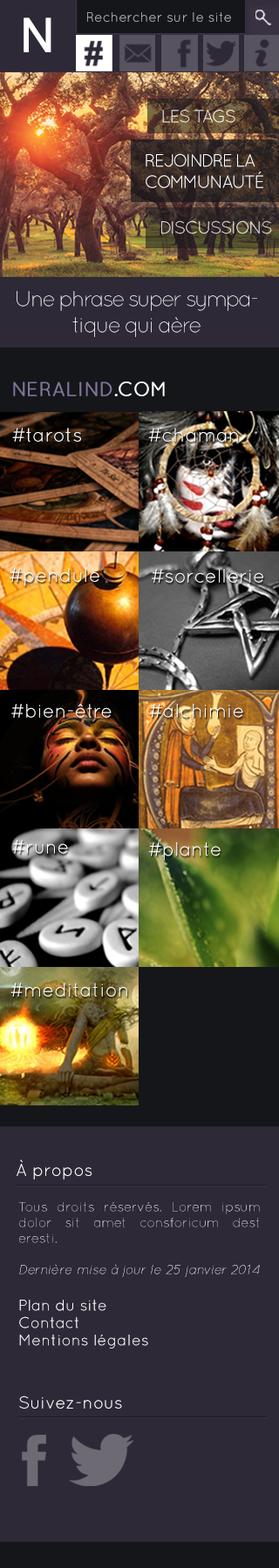
<style>
.page{position:relative;width:279px;height:1568px;background:#2e2937}
.page>*{position:absolute;margin:0}
.t1{font:47px "ArialMT";letter-spacing:-0.075em;color:#ffffff;font-weight:bold}
.t2{font:13.6px "QuicksandBook-Regular";color:#bababb}
.t3{font:17.8px "Quicksand-Regular";letter-spacing:-0.075em;color:#fef6e5;text-transform:uppercase}
.t4{font:17.8px "Quicksand-Regular";letter-spacing:-0.075em;color:#ffffff;text-transform:uppercase}
.t5{font:17.8px "Quicksand-Regular";letter-spacing:-0.075em;color:#e1ddd9;text-transform:uppercase}
.t6{font:21.8px "Quicksand-Light";letter-spacing:-0.075em;color:#ffffff}
.t7{font:20px "QuicksandBook-Regular";color:#817399;text-transform:uppercase;font-weight:bold}
.t8{font:20px "QuicksandBook-Regular";color:#ffffff;text-transform:uppercase;font-weight:bold}
.t9{font:19.5px "QuicksandBook-Regular";color:#ffffff}
.t10{font:17.4px "QuicksandBook-Regular";color:#ffffff}
.t11{font:13.1px "Quicksand-Light"}
.t12{font:13.1px "Quicksand-LightItalic"}
.t13{font:15.7px/17.4px "QuicksandBook-Regular";color:#ffffff}
</style>
<div class="page">
<p class="t1" style="left:24px;top:17px;width:27px;height:35px">N</p>
<p class="t2" style="left:87px;top:12px;width:144px;height:10px">Rechercher sur le site</p>
<p class="t3" style="left:162px;top:110px;width:73px;height:13px">Les tags</p>
<p class="t4" style="left:145px;top:153px;width:118px;height:35px">Rejoindre la communauté</p>
<p class="t5" style="left:161px;top:220px;width:111px;height:14px">Discussions</p>
<p class="t6" style="left:17px;top:291px;width:240px;height:46px;text-align:center">Une phrase super sympatique qui aère</p>
<p class="t7" style="left:13px;top:382px;width:152px;height:14px">Neralind<span class="t8">.com</span></p>
<p class="t9" style="left:12px;top:428px;width:69px;height:14px">#tarots</p>
<p class="t9" style="left:148px;top:428px;width:90px;height:14px">#chaman</p>
<p class="t9" style="left:10px;top:568px;width:89px;height:18px">#pendule</p>
<p class="t9" style="left:152px;top:569px;width:111px;height:14px">#sorcellerie</p>
<p class="t9" style="left:11px;top:704px;width:101px;height:14px">#bien-être</p>
<p class="t9" style="left:149px;top:703px;width:94px;height:15px">#alchimie</p>
<p class="t9" style="left:12px;top:840px;width:56px;height:14px">#rune</p>
<p class="t9" style="left:148px;top:841px;width:72px;height:19px">#plante</p>
<p class="t9" style="left:10px;top:983px;width:117px;height:14px">#meditation</p>
<p class="t10" style="left:17px;top:1159px;width:75px;height:20px">À propos</p>
<p class="t11" style="left:18px;top:1202px;width:242px;height:75px;text-align:justify">Tous droits réservés. Lorem ipsum dolor sit amet consforicum dest eresti. <br><br><span class="t12">Dernière mise à jour le 25 janvier 2014</span></p>
<p class="t13" style="left:19px;top:1300px;width:129px;height:48px">Plan du site<br>Contact<br>Mentions légales</p>
<p class="t10" style="left:19px;top:1396px;width:103px;height:13px">Suivez-nous</p>
</div>
